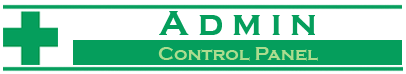
<style>
.page{position:relative;width:406px;height:74px;background:#ffffff}
.page>*{position:absolute;margin:0}
.t1{font:36px "CopperplateGothic-Bold";letter-spacing:0.25em;color:#059e5c}
.t2{font:19px "CopperplateGothic-Bold";color:#acdc8f}
</style>
<div class="page">
<p class="t1" style="left:159px;top:11px;width:156px;height:24px">Admin</p>
<p class="t2" style="left:158px;top:47px;width:160px;height:14px">Control Panel</p>
</div>
